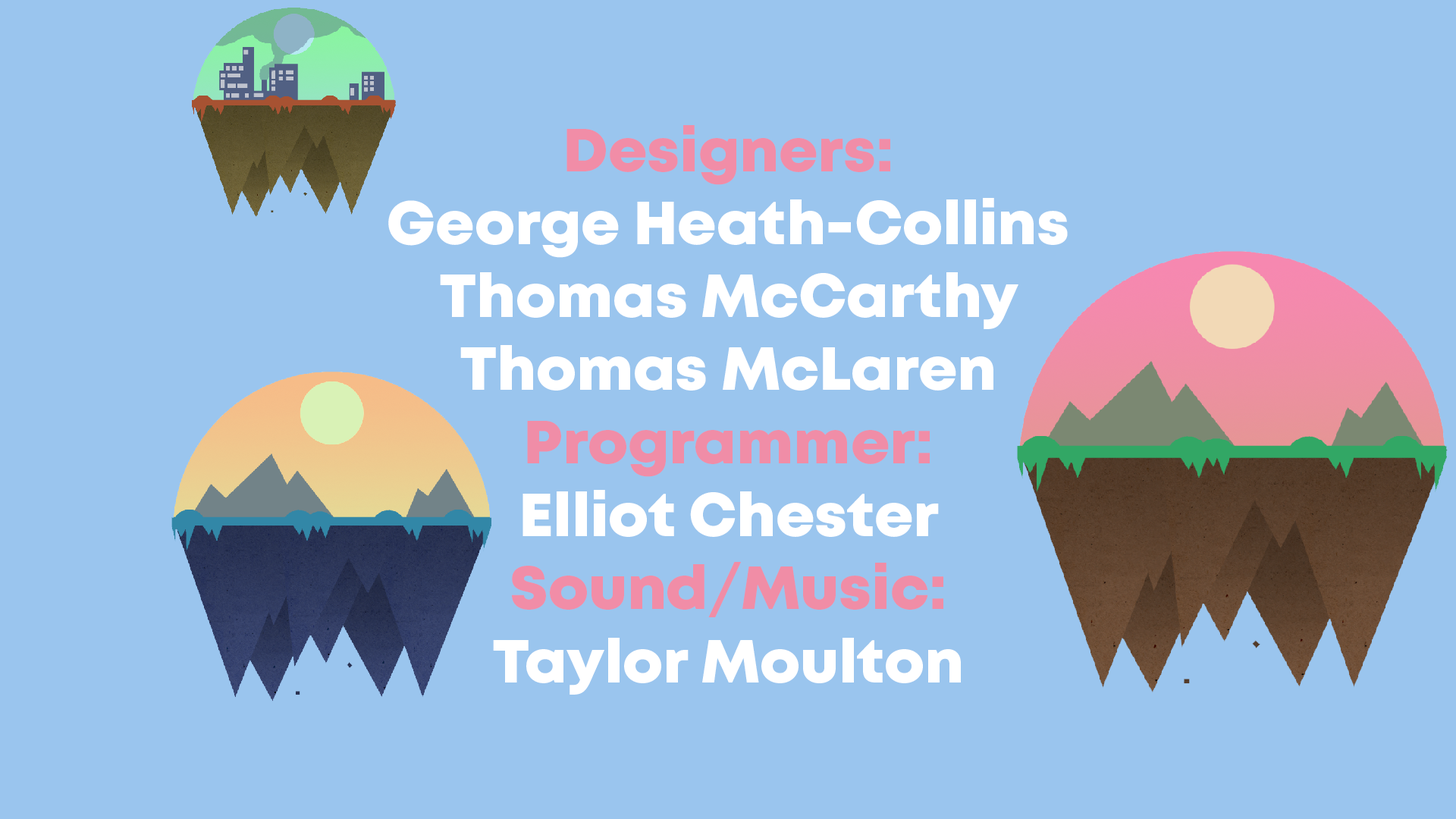
<style>
.page{position:relative;width:1456px;height:819px;background:#9ac5ee}
.page>*{position:absolute;margin:0}
.t1{font:60.9px "Mont-HeavyDEMO";color:#ffffff}
.t2{font:60.9px "Mont-HeavyDEMO";color:#f18da7}
.t3{font:60.9px "Mont-HeavyDEMO";color:#f08da7}
.t4{font:60.9px "LucidaSans-Demi";color:#f08da6}
.t5{font:60.9px "Mont-HeavyDEMO";color:#f08da6}
</style>
<div class="page">
<p class="t1" style="left:388px;top:125px;width:680px;height:570px;text-align:center"><span class="t2">Designers:<br></span>George Heath-Collins<br>Thomas McCarthy<br>Thomas McLaren<br><span class="t3">Programmer:<br></span>Elliot Chester<br><span class="t2">Sound</span><span class="t4">/</span><span class="t5">Music:<br></span>Taylor Moulton</p>
</div>
